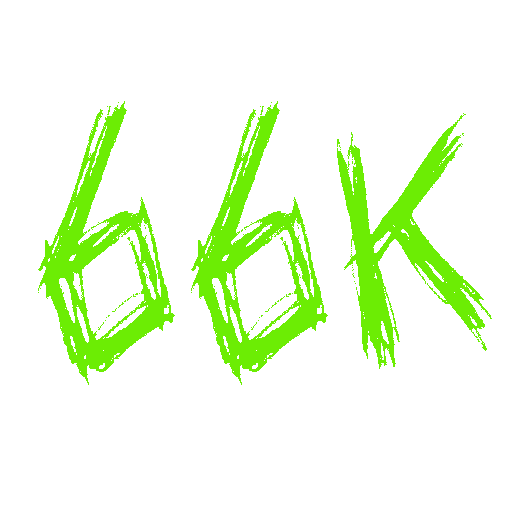
<style>
.page{position:relative;width:512px;height:512px;background:#ffffff}
.page>*{position:absolute;margin:0}
.t1{font:294.9px "DrawingBlood";color:#6ced04;scale:0.88 1}
</style>
<div class="page">
<p class="t1" style="left:38px;top:101px;width:454px;height:284px">66k</p>
</div>
